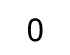
<style>
.page{position:relative;width:70px;height:55px;background:#ffffff}
.page>*{position:absolute;margin:0}
.t1{font:31.8px "DroidSans";color:#000000}
</style>
<div class="page">
<p class="t1" style="left:28px;top:18px;width:15px;height:24px">0</p>
</div>
